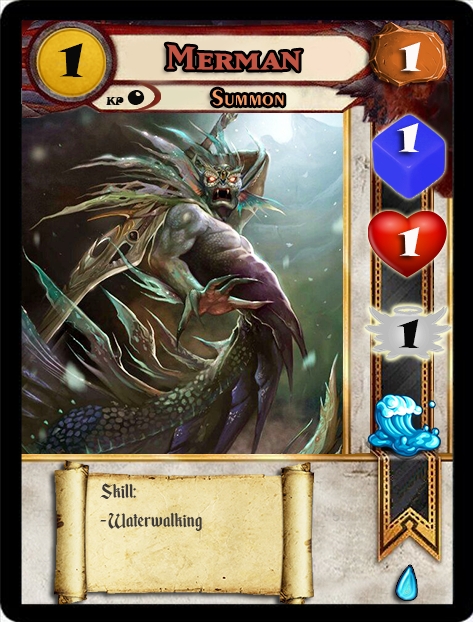
<style>
.page{position:relative;width:473px;height:622px}
.page>*{position:absolute;margin:0}
.t1{font:46.6px "SnapITC-Regular";color:#090909;scale:1.05 1}
.t2{font:40px "MatrixBoldSmallCaps";color:#c25443;scale:1.06 1}
.t3{font:40px "SnapITC-Regular";color:#fef9f9;scale:1.05 1}
.t4{font:22.7px "Exotic350BT-DemiBold";color:#f89c64;scale:1.06 1}
.t5{font:20.5px "SnapITC-Regular";color:#090909}
.t6{font:40px "SnapITC-Regular";color:#090909;scale:1.05 1}
.t7{font:24px "EnchantedLand";color:#3e3939}
</style>
<div class="page">
<p class="t1" style="left:58px;top:43px;width:25px;height:34px">1</p>
<p class="t2" style="left:166px;top:44px;width:136px;height:27px">Merman</p>
<p class="t3" style="left:399px;top:42px;width:22px;height:29px">1</p>
<p class="t4" style="left:212px;top:89px;width:72px;height:17px">Summon</p>
<p class="t5" style="left:127px;top:90px;width:18px;height:15px">0</p>
<p class="t3" style="left:397px;top:123px;width:22px;height:29px">1</p>
<p class="t3" style="left:398px;top:227px;width:22px;height:29px">1</p>
<p class="t6" style="left:397px;top:319px;width:22px;height:29px">1</p>
<p class="t7" style="left:100px;top:483px;width:102px;height:48px">Skill:<br>- Waterwalking</p>
</div>
